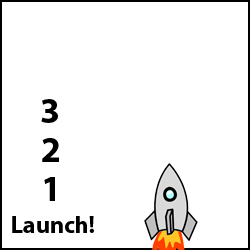
<style>
.page{position:relative;width:250px;height:250px;background:#ffffff}
.page>*{position:absolute;margin:0}
.t1{font:36px "Myriad-Bold";color:#000000}
.t2{font:24px "Myriad-Bold";color:#000000}
</style>
<div class="page">
<p class="t1" style="left:41px;top:99px;width:17px;height:24px">3</p>
<p class="t1" style="left:42px;top:138px;width:17px;height:24px">2</p>
<p class="t1" style="left:44px;top:177px;width:11px;height:24px">1</p>
<p class="t2" style="left:12px;top:216px;width:82px;height:17px">Launch!</p>
</div>
